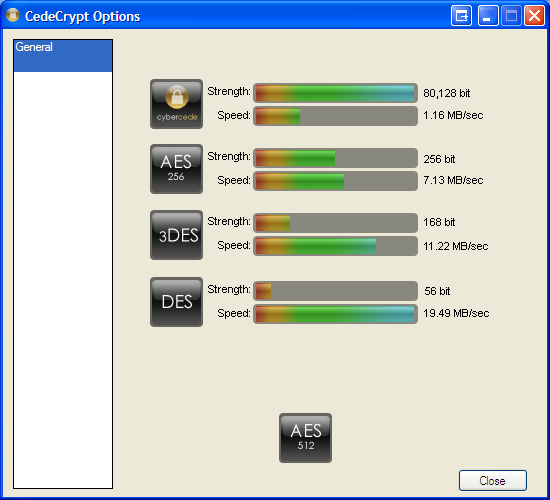
<style>
.page{position:relative;width:550px;height:500px;background:#ece9d8}
.page>*{position:absolute;margin:0}
.t1{font:11px "ArialMT";color:#000000}
.t2{font:7.5px "CenturyGothic"}
.t3{font:9px "ArialMT";color:#000000}
.t4{font:18px "CenturyGothic";color:#ffffff}
.t5{font:10px "CenturyGothic";color:#ffffff}
.t6{font:14px "CenturyGothic";color:#ffffff}
</style>
<div class="page">
<p class="t1" style="left:208px;top:87px;width:42px;height:10px">Strength:</p>
<p class="t1" style="left:424px;top:89px;width:46px;height:10px">80,128 bit</p>
<p class="t2" style="left:157px;top:113px;width:41px;height:8px">cybercede</p>
<p class="t1" style="left:218px;top:111px;width:32px;height:10px"><span class="t3">  </span>Speed:</p>
<p class="t1" style="left:424px;top:111px;width:59px;height:8px">1.16 MB/sec</p>
<p class="t4" style="left:160px;top:154px;width:31px;height:26px;text-align:center">AES<br><span class="t5">256</span></p>
<p class="t1" style="left:424px;top:155px;width:31px;height:8px">256 bit</p>
<p class="t1" style="left:424px;top:176px;width:59px;height:8px">7.13 MB/sec</p>
<p class="t1" style="left:424px;top:218px;width:31px;height:8px">168 bit</p>
<p class="t4" style="left:159px;top:228px;width:39px;height:14px"><span class="t5"><br></span><span class="t6">3</span>DES</p>
<p class="t1" style="left:424px;top:242px;width:64px;height:8px">11.22 MB/sec</p>
<p class="t4" style="left:162px;top:294px;width:30px;height:15px">DES</p>
<p class="t1" style="left:425px;top:287px;width:25px;height:8px">56 bit</p>
<p class="t1" style="left:424px;top:309px;width:65px;height:8px">19.49 MB/sec</p>
<p class="t4" style="left:290px;top:423px;width:31px;height:26px;text-align:center">AES<br><span class="t5">512</span></p>
</div>
